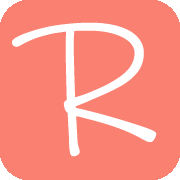
<style>
.page{position:relative;width:180px;height:180px;background:#fa8072}
.page>*{position:absolute;margin:0}
.t1{font:180px "InkFree";color:#ffffff}
</style>
<div class="page">
<p class="t1" style="left:12px;top:22px;width:145px;height:135px">R</p>
</div>
